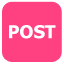
<style>
.page{position:relative;width:64px;height:64px;background:#ff4081}
.page>*{position:absolute;margin:0}
.t1{font:18px "Tahoma-Bold";color:#ffffff}
</style>
<div class="page">
<p class="t1" style="left:9px;top:25px;width:47px;height:14px">POST</p>
</div>
